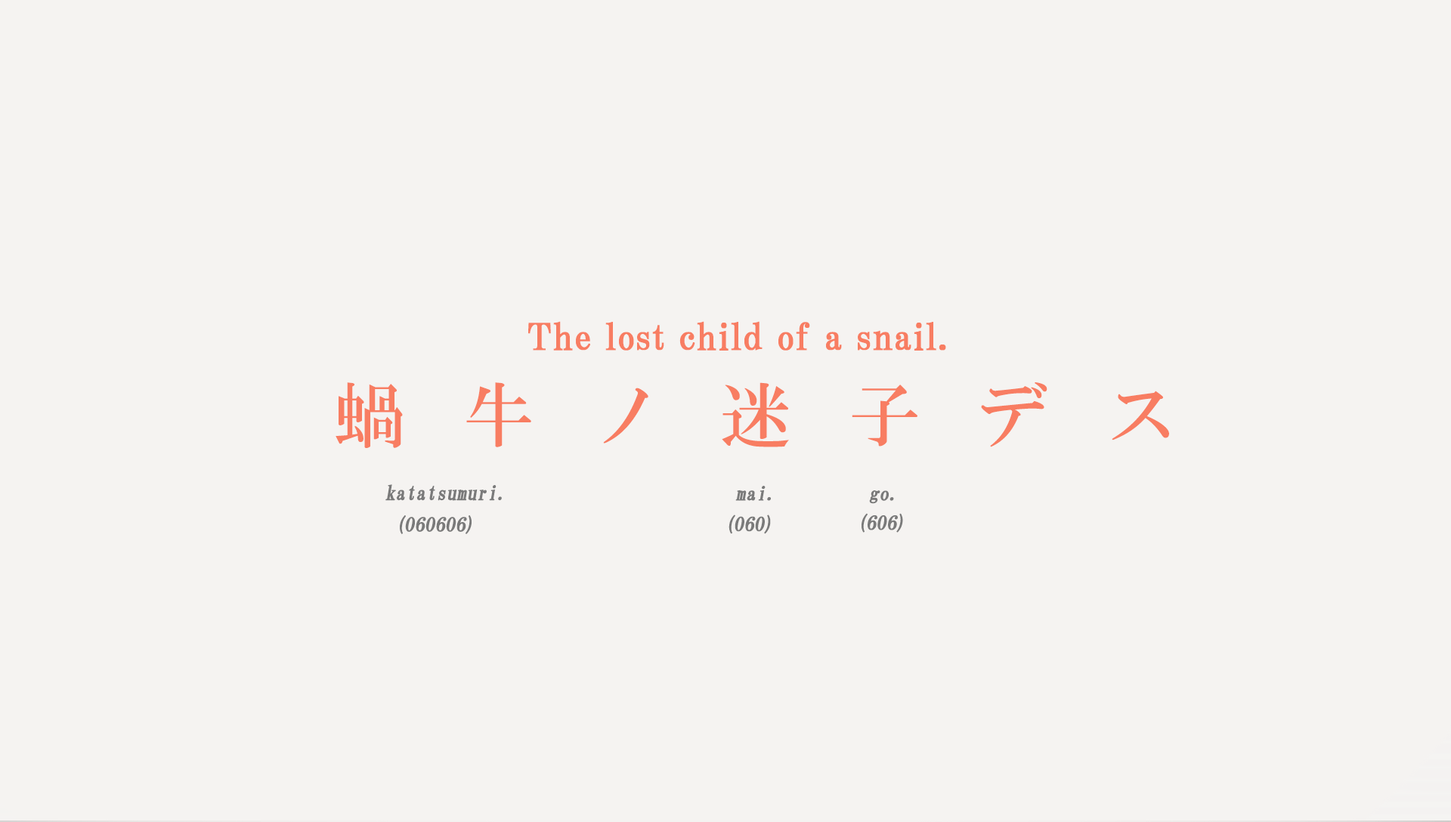
<style>
.page{position:relative;width:1451px;height:822px;background:#f5f3f1}
.page>*{position:absolute;margin:0}
.t1{font:36.3px "HGPMinchoB";letter-spacing:0.01em;color:#f87d62;font-weight:bold}
.t2{font:71px "HGMinchoB";letter-spacing:0.81em;color:#f87d62}
.t3{font:20.2px "HGMinchoB";color:#7a7a7a;font-weight:bold;scale:0.96 1}
.t4{font:19.3px "HGMinchoB";color:#7a7a7a;font-weight:bold;font-style:italic}
</style>
<div class="page">
<p class="t1" style="left:528px;top:321px;width:418px;height:30px">The lost child of a snail.</p>
<p class="t2" style="left:335px;top:382px;width:834px;height:66px">蝸牛ノ迷子デス</p>
<p class="t3" style="left:385px;top:484px;width:117px;height:17px">katatsumuri.</p>
<p class="t4" style="left:735px;top:486px;width:36px;height:15px">mai.</p>
<p class="t4" style="left:869px;top:490px;width:25px;height:14px">go.</p>
<p class="t4" style="left:400px;top:515px;width:71px;height:19px">(060606)</p>
<p class="t4" style="left:728px;top:515px;width:43px;height:19px">(060)</p>
<p class="t4" style="left:861px;top:513px;width:42px;height:20px">(606)</p>
</div>
